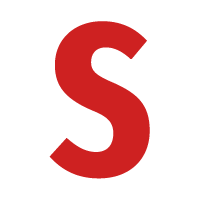
<style>
.page{position:relative;width:200px;height:200px;background:#ffffff}
.page>*{position:absolute;margin:0}
.t1{font:200px "GlowSansSC-Compressed-ExtraBold";color:#ce2121;font-weight:bold}
</style>
<div class="page">
<p class="t1" style="left:49px;top:21px;width:101px;height:158px">S</p>
</div>
